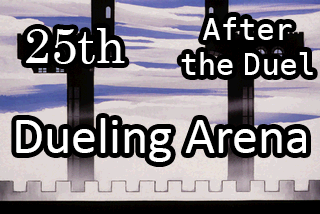
<style>
.page{position:relative;width:320px;height:214px;background:#000000}
.page>*{position:absolute;margin:0}
.t1{font:30px "DejaVuSansMono";color:#ffffff}
.t2{font:48px "Century";color:#ffffff}
.t3{font:52px "Calibri";color:#ffffff}
</style>
<div class="page">
<p class="t1" style="left:203px;top:17px;width:89px;height:23px">After</p>
<p class="t2" style="left:26px;top:28px;width:99px;height:36px">25th</p>
<p class="t1" style="left:181px;top:52px;width:132px;height:23px">the Duel</p>
<p class="t3" style="left:16px;top:118px;width:290px;height:44px">Dueling Arena</p>
</div>
